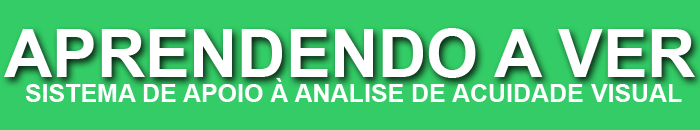
<style>
.page{position:relative;width:700px;height:130px;background:#33cc66}
.page>*{position:absolute;margin:0}
.t1{font:66.7px "Arial-BoldMT";color:#ffffff}
.t2{font:25px "Arial-BoldMT";color:#ffffff}
</style>
<div class="page">
<p class="t1" style="left:4px;top:28px;width:691px;height:50px">APRENDENDO A VER</p>
<p class="t2" style="left:25px;top:78px;width:657px;height:24px">SISTEMA DE APOIO À ANALISE DE ACUIDADE VISUAL</p>
</div>
